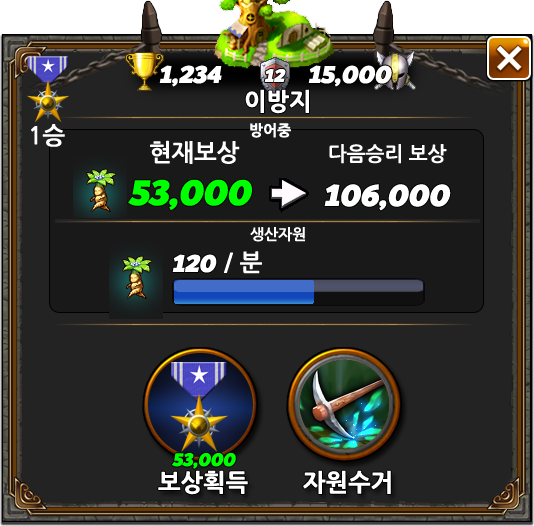
<style>
.page{position:relative;width:534px;height:526px;background:#232323}
.page>*{position:absolute;margin:0}
.t1{font:24px "Souses";color:#ffffff}
.t2{font:18px "Souses";color:#ffffff}
.t3{font:24px "NanumGothicExtraBold";color:#ffffff}
.t4{font:24px "NanumGothicBold";color:#ffffff}
.t5{font:15px "NanumGothicExtraBold";color:#ffffff}
.t6{font:20px "NanumGothicBold";color:#ffffff}
.t7{font:35px "Souses";color:#00ff00}
.t8{font:30px "Souses";color:#ffffff}
.t9{font:15px "NanumGothicBold";color:#ffffff}
.t10{font:18px "Souses";color:#00ff00}
</style>
<div class="page">
<p class="t1" style="left:159px;top:65px;width:63px;height:22px">1,234</p>
<p class="t1" style="left:308px;top:65px;width:84px;height:22px">15,000</p>
<p class="t2" style="left:264px;top:69px;width:22px;height:13px">12</p>
<p class="t3" style="left:245px;top:89px;width:64px;height:25px">이방지</p>
<p class="t4" style="left:31px;top:124px;width:34px;height:23px">1승</p>
<p class="t5" style="left:250px;top:123px;width:41px;height:15px">방어중</p>
<p class="t4" style="left:150px;top:140px;width:90px;height:24px">현재보상</p>
<p class="t6" style="left:329px;top:144px;width:118px;height:20px">다음승리 보상</p>
<p class="t7" style="left:128px;top:179px;width:124px;height:31px">53,000</p>
<p class="t8" style="left:324px;top:184px;width:127px;height:27px">106,000</p>
<p class="t9" style="left:250px;top:227px;width:55px;height:15px">생산자원</p>
<p class="t1" style="left:172px;top:254px;width:45px;height:19px">120</p>
<p class="t4" style="left:224px;top:251px;width:38px;height:23px">/ 분</p>
<p class="t10" style="left:172px;top:453px;width:64px;height:16px">53,000</p>
<p class="t3" style="left:158px;top:470px;width:90px;height:25px">보상획득</p>
<p class="t3" style="left:303px;top:470px;width:88px;height:24px">자원수거</p>
</div>
